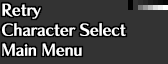
<style>
.page{position:relative;width:168px;height:64px;background:#333333}
.page>*{position:absolute;margin:0}
.t1{font:16px/20px "ChiaroStd-B";letter-spacing:-0.015em;color:#ffffff}
</style>
<div class="page">
<p class="t1" style="left:2px;top:3px;width:124px;height:53px">Retry<br>Character Select<br>Main Menu</p>
</div>
